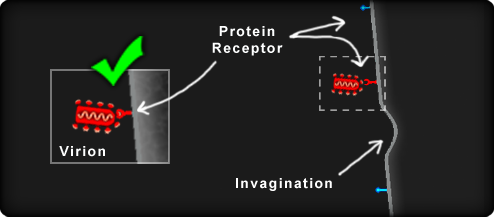
<style>
.page{position:relative;width:494px;height:217px;background:#1b1b1b}
.page>*{position:absolute;margin:0}
.t1{font:14px "Arial-BoldMT";letter-spacing:0.1em;color:#feffff}
.t2{font:14px "Arial-BoldMT";letter-spacing:0.1em;color:#ffffff}
</style>
<div class="page">
<p class="t1" style="left:212px;top:26px;width:71px;height:30px;text-align:center">Protein<br>Receptor</p>
<p class="t1" style="left:59px;top:146px;width:46px;height:11px">Virion</p>
<p class="t2" style="left:236px;top:178px;width:96px;height:13px">Invagination</p>
</div>
